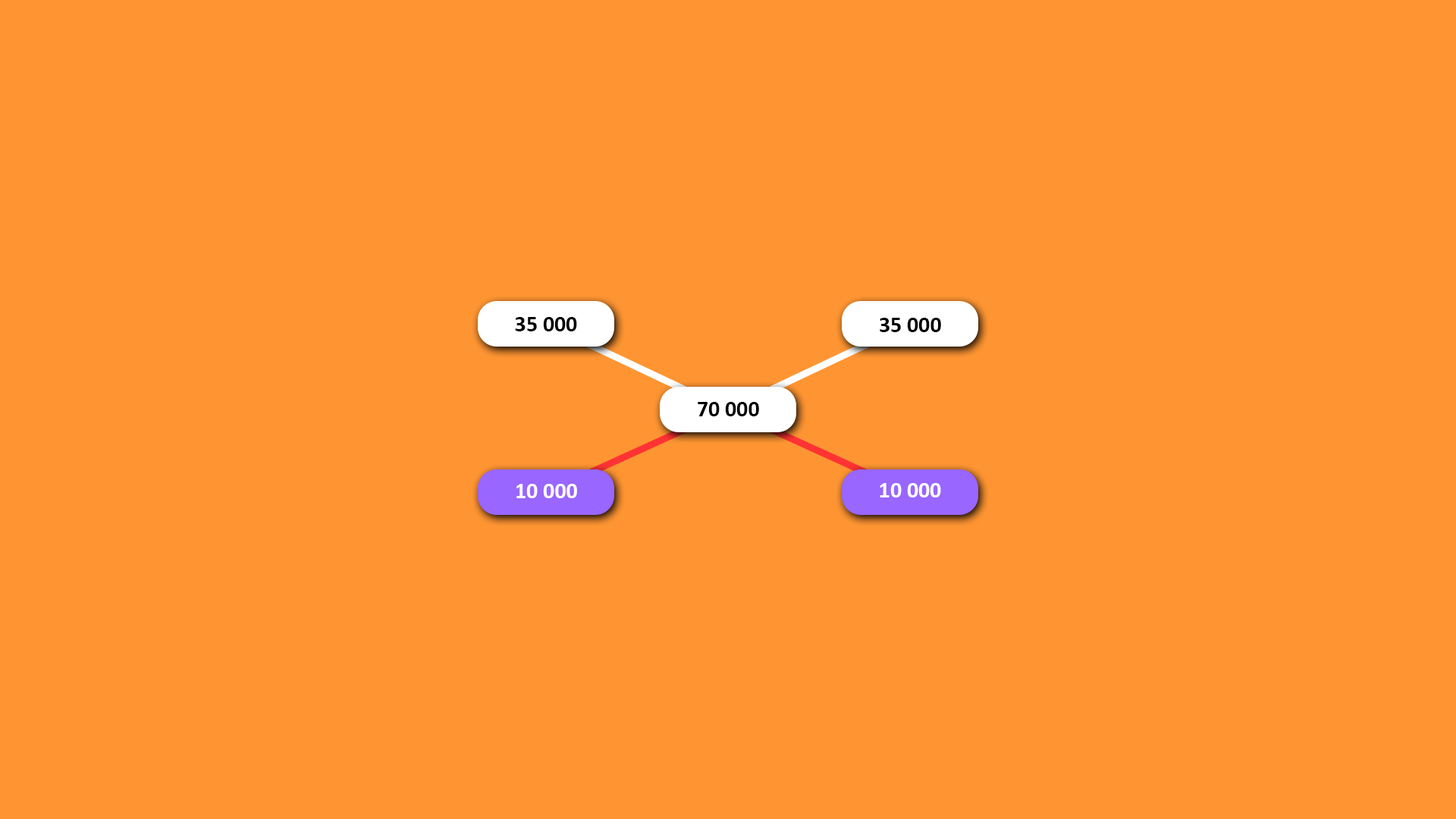
<style>
.page{position:relative;width:1456px;height:819px;background:#ff9532}
.page>*{position:absolute;margin:0}
.t1{font:22.7px "Calibri-Bold";color:#000000}
.t2{font:22.7px "Calibri-Bold";color:#ffffff}
</style>
<div class="page">
<p class="t1" style="left:515px;top:317px;width:62px;height:14px">35 000</p>
<p class="t1" style="left:880px;top:318px;width:61px;height:14px">35 000</p>
<p class="t1" style="left:698px;top:402px;width:61px;height:14px">70 000</p>
<p class="t2" style="left:516px;top:484px;width:61px;height:14px">10 000</p>
<p class="t2" style="left:880px;top:483px;width:61px;height:14px">10 000</p>
</div>
